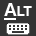
<style>
.page{position:relative;width:36px;height:36px;background:#333333}
.page>*{position:absolute;margin:0}
.t1{font:14px "Swiss721BT-Bold";color:#ffffff}
.t2{font:18px "Swiss721BT-Bold";color:#ffffff}
</style>
<div class="page">
<p class="t1" style="left:4px;top:3px;width:28px;height:13px"><span class="t2">A</span>LT</p>
</div>
